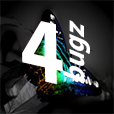
<style>
.page{position:relative;width:114px;height:114px}
.page>*{position:absolute;margin:0}
.t1{font:91.3px "MyriadPro-Bold";color:#ffffff;scale:0.88 1}
.t2{font:31.8px "MyriadPro-Bold";color:#ffffff;scale:0.84 1}
</style>
<div class="page">
<p class="t1" style="left:22px;top:21px;width:41px;height:63px;rotate:13deg">4</p>
<p class="t2" style="left:63px;top:20px;width:27px;height:64px;rotate:-90deg">bugz</p>
</div>
